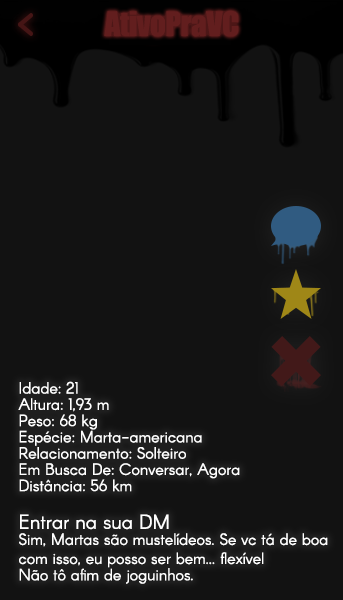
<style>
.page{position:relative;width:343px;height:600px;background:#121212}
.page>*{position:absolute;margin:0}
.t1{font:31px "Impact";letter-spacing:-0.015em;color:#621e1e}
.t2{font:16px "Arcon-Regular";color:#ffffff}
.t3{font:16px/19px "Arcon-Regular";letter-spacing:-0.001em;color:#ffffff}
.t4{font:20px/19px "Arcon-Regular";letter-spacing:-0.001em;color:#ffffff}
.t5{font:16px/22px "Arcon-Regular";letter-spacing:-0.001em;color:#ffffff}
.t6{font:16px/19.3px "Arcon-Regular";letter-spacing:-0.001em;color:#ffffff}
</style>
<div class="page">
<p class="t1" style="left:104px;top:10px;width:135px;height:27px">AtivoPraVC</p>
<p class="t2" style="left:18px;top:381px;width:222px;height:111px">Idade: 21<br>Altura: 1,93 m<br>Peso: 68 kg<br>Espécie: Marta-americana<br>Relacionamento: Solteiro<br>Em Busca De: Conversar, Agora<br>Distância: 56 km</p>
<p class="t3" style="left:19px;top:514px;width:309px;height:70px"><span class="t4">Entrar na sua DM<br></span>Sim, Martas são mustelídeos. Se vc tá de boa<br><span class="t5">com isso, eu posso ser bem... flexível<br></span><span class="t6">Não tô afim de joguinhos.</span></p>
</div>
